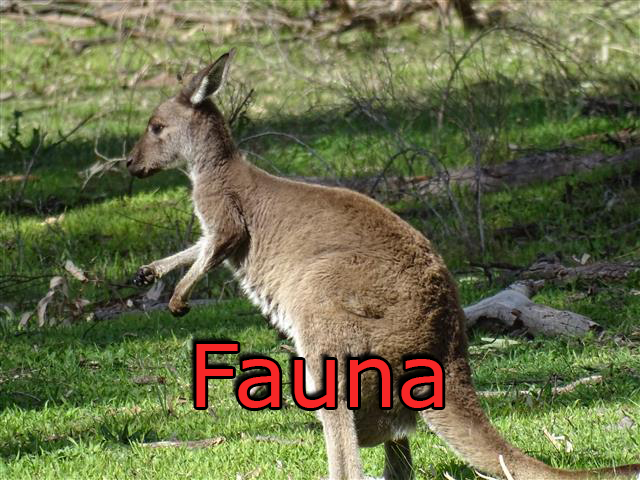
<style>
.page{position:relative;width:640px;height:480px}
.page>*{position:absolute;margin:0}
.t1{font:87.4px "Verdana";color:#f72727}
</style>
<div class="page">
<p class="t1" style="left:196px;top:344px;width:247px;height:64px">Fauna</p>
</div>
